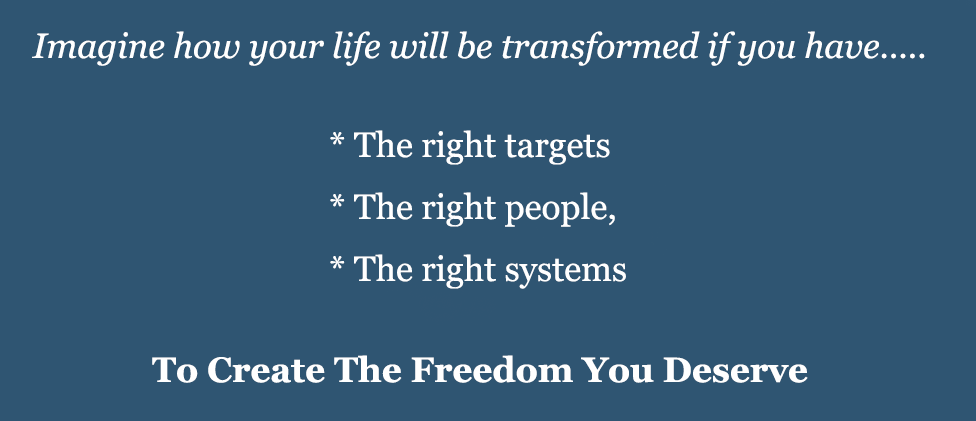
<style>
.page{position:relative;width:976px;height:421px;background:#2f5572}
.page>*{position:absolute;margin:0}
.t1{font:35px "Georgia-Italic";color:#ffffff}
.t2{font:35px "Georgia";color:#ffffff}
.t3{font:35px "Georgia-Bold";color:#ffffff}
</style>
<div class="page">
<p class="t1" style="left:32px;top:31px;width:893px;height:35px">Imagine how your life will be transformed if you have.....</p>
<p class="t2" style="left:330px;top:130px;width:296px;height:159px">* The right targets<br>* The right people, <br>* The right systems</p>
<p class="t3" style="left:152px;top:355px;width:656px;height:28px">To Create The Freedom You Deserve</p>
</div>
